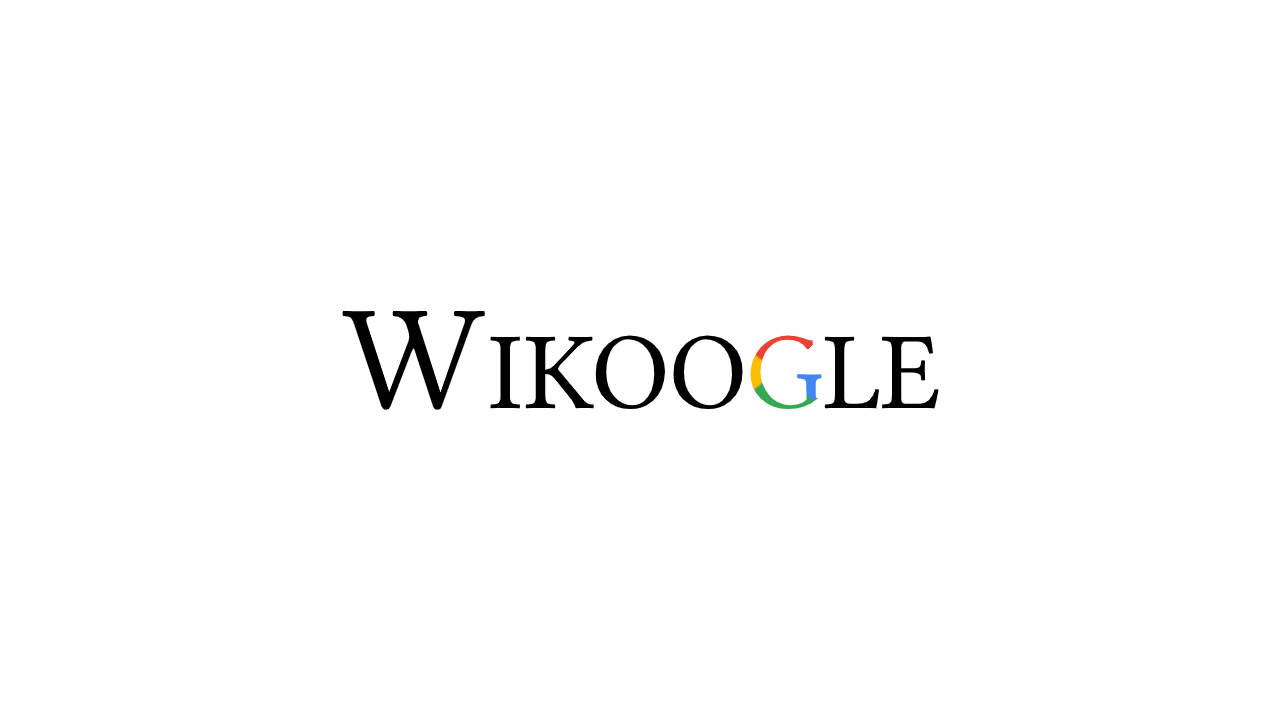
<style>
.page{position:relative;width:1280px;height:720px;background:#ffffff}
.page>*{position:absolute;margin:0}
.t1{font:110px "LinLibertine";color:#000000}
.t2{font:150px "LinLibertine";color:#000000}
</style>
<div class="page">
<p class="t1" style="left:342px;top:310px;width:597px;height:100px"><span class="t2">W</span>IKOOGLE</p>
</div>
